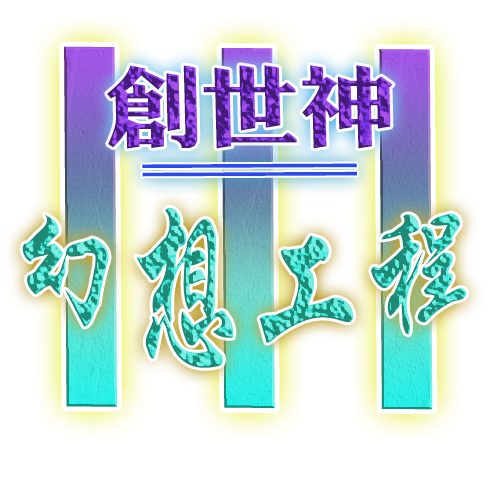
<style>
.page{position:relative;width:500px;height:500px;background:#ffffff}
.page>*{position:absolute;margin:0}
.t1{font:89.3px "¾­µä´Ö·ÂºÚ Regular";scale:1.09 1}
.t2{font:62.5px "¾­µä´Ö·ÂºÚ Regular";color:#284af0;scale:7.84 1}
.t3{font:108.4px "JQXingKaiJT";scale:1.08 1}
</style>
<div class="page">
<p class="t1" style="left:107px;top:65px;width:286px;height:84px">创世神</p>
<p class="t2" style="left:142px;top:163px;width:215px;height:14px">=</p>
<p class="t3" style="left:22px;top:208px;width:445px;height:160px">幻想工程</p>
</div>
